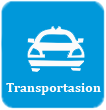
<style>
.page{position:relative;width:106px;height:110px;background:#0098da}
.page>*{position:absolute;margin:0}
.t1{font:13.3px "Cambria-Bold";color:#fbfbfb}
</style>
<div class="page">
<p class="t1" style="left:6px;top:83px;width:95px;height:12px">Transportasion</p>
</div>
